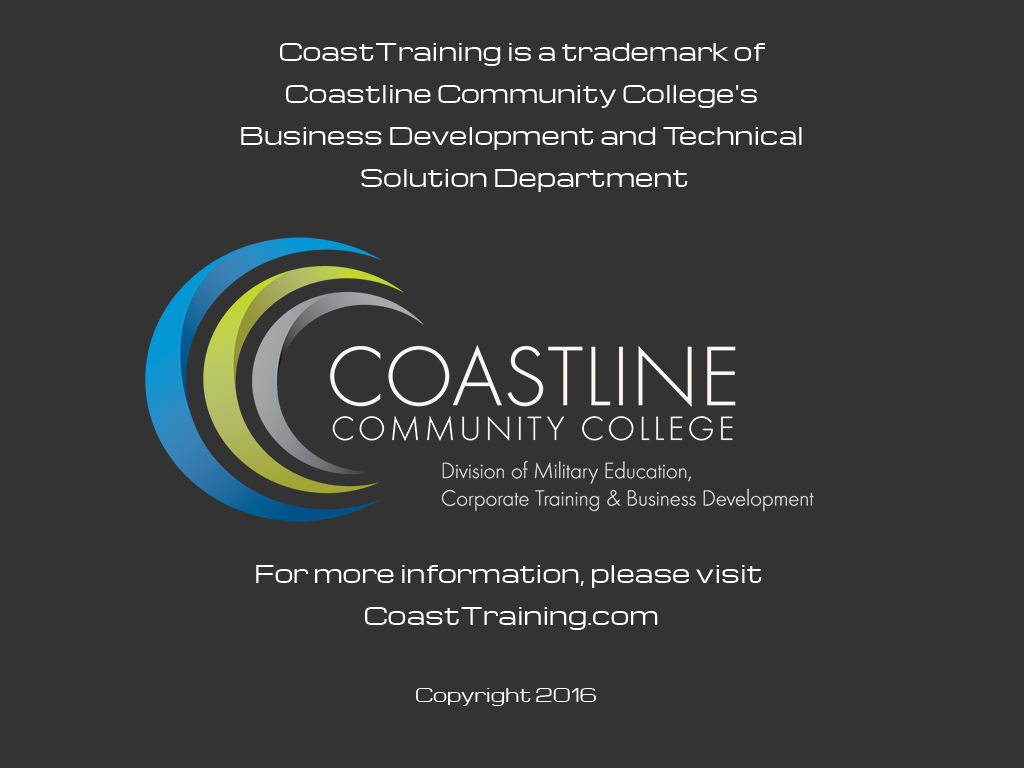
<style>
.page{position:relative;width:1024px;height:768px;background:#333333}
.page>*{position:absolute;margin:0}
.t1{font:24px/22px "Michroma";color:#ffffff}
.t2{font:18px "Michroma";color:#ffffff}
</style>
<div class="page">
<p class="t1" style="left:241px;top:43px;width:561px;height:149px;text-align:center">CoastTraining is a trademark of <br>Coastline Community College's <br>Business Development and Technical <br>Solution Department</p>
<p class="t1" style="left:256px;top:565px;width:506px;height:65px;text-align:center">For more information, please visit <br>CoastTraining.com</p>
<p class="t2" style="left:416px;top:688px;width:180px;height:18px">Copyright 2016</p>
</div>
